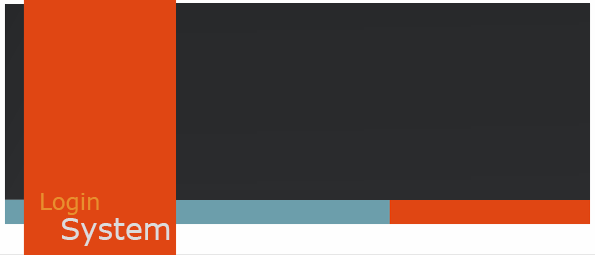
<style>
.page{position:relative;width:595px;height:255px;background:#292a2c}
.page>*{position:absolute;margin:0}
.t1{font:23px "MSReferenceSansSerif";color:#e88f2e}
.t2{font:30px "MSReferenceSansSerif";color:#dcdcdc}
</style>
<div class="page">
<p class="t1" style="left:41px;top:193px;width:58px;height:22px">Login</p>
<p class="t2" style="left:62px;top:218px;width:108px;height:28px">System</p>
</div>
